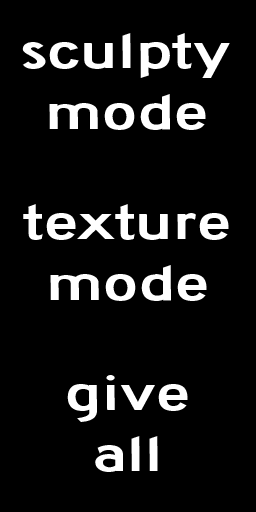
<style>
.page{position:relative;width:256px;height:512px;background:#000000}
.page>*{position:absolute;margin:0}
.t1{font:50.6px "Roadgeek2005SeriesD";color:#ffffff;scale:1.43 1}
</style>
<div class="page">
<p class="t1" style="left:22px;top:33px;width:208px;height:97px;text-align:center">sculpty<br>mode</p>
<p class="t1" style="left:23px;top:204px;width:206px;height:97px;text-align:center">texture<br>mode</p>
<p class="t1" style="left:67px;top:375px;width:121px;height:97px;text-align:center">give<br>all</p>
</div>
